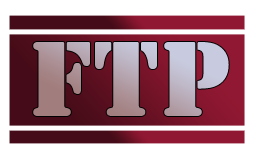
<style>
.page{position:relative;width:256px;height:160px;background:#ffffff}
.page>*{position:absolute;margin:0}
.t1{font:108px "Stencil";font-weight:bold}
</style>
<div class="page">
<p class="t1" style="left:33px;top:42px;width:196px;height:74px">FTP</p>
</div>
